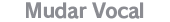
<style>
.page{position:relative;width:170px;height:22px;background:#ffffff}
.page>*{position:absolute;margin:0}
.t1{font:20px "RodinPro-B";letter-spacing:-0.039em;color:#8b8c92}
</style>
<div class="page">
<p class="t1" style="left:26px;top:2px;width:118px;height:17px">Mudar Vocal</p>
</div>
